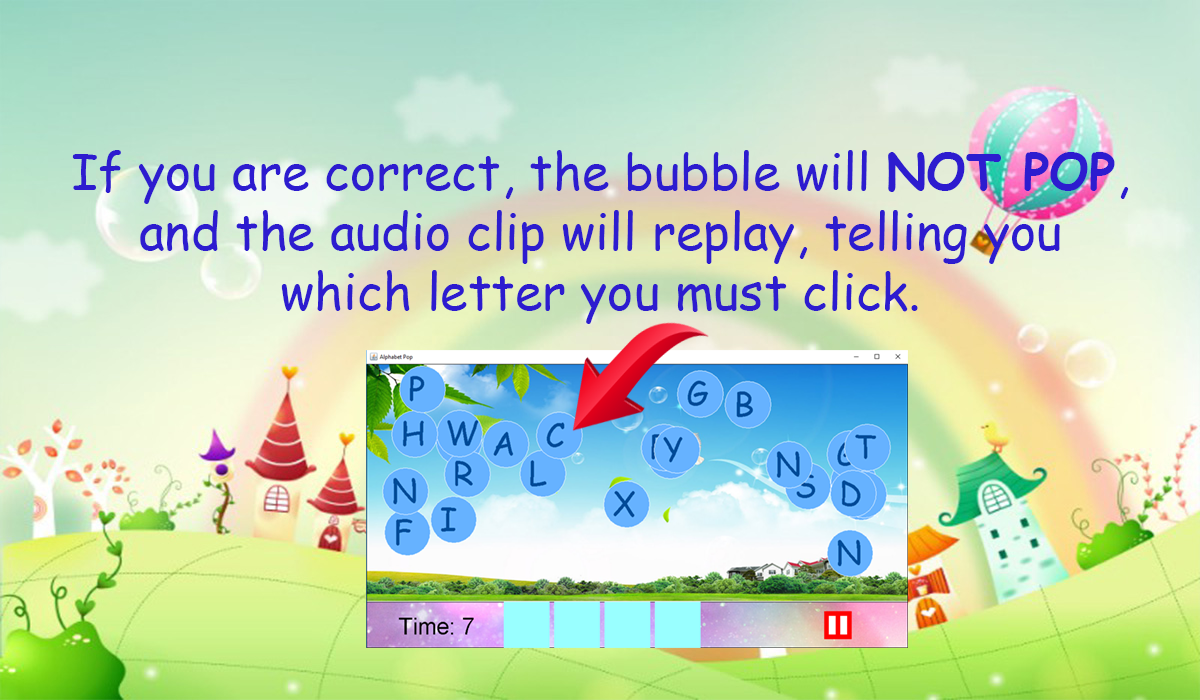
<style>
.page{position:relative;width:1200px;height:700px}
.page>*{position:absolute;margin:0}
.t1{font:12px "ComicSansMS";color:#2d1ccf}
.t2{font:12px "ComicSansMS-Bold";color:#2d1ccf}
</style>
<div class="page">
<p class="t1" style="left:72px;top:150px;width:1057px;height:174px;text-align:center">If you are correct, the bubble will <span class="t2">NOT POP</span>,<br>and the audio clip will replay, telling you<br>which letter you must click.</p>
</div>
